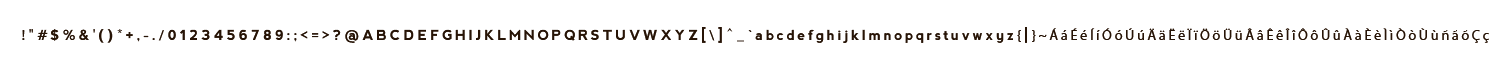
<style>
.page{position:relative;width:1489px;height:64px;background:#ffffff}
.page>*{position:absolute;margin:0}
.t1{font:14px "nevis-Bold";letter-spacing:0.2em;color:#271406}
.t2{font:14px "MyriadPro-Regular";letter-spacing:0.2em;color:#271406}
</style>
<div class="page">
<p class="t1" style="left:22px;top:27px;width:1467px;height:16px">!"#$%&amp;'()*+,-./0123456789:;&lt;=&gt;?@ABCDEFGHIJKLMNOPQRSTUVWXYZ[\]^_<span class="t2">`</span>abcdefghijklmnopqrstuvwxyz<span class="t2">{</span>|<span class="t2">}~ÁáÉéÍíÓóÚúÄäËëÏïÖöÜüÂâÊêÎîÔôÛûÀàÈèÌìÒòÙùñãõÇç</span></p>
</div>
